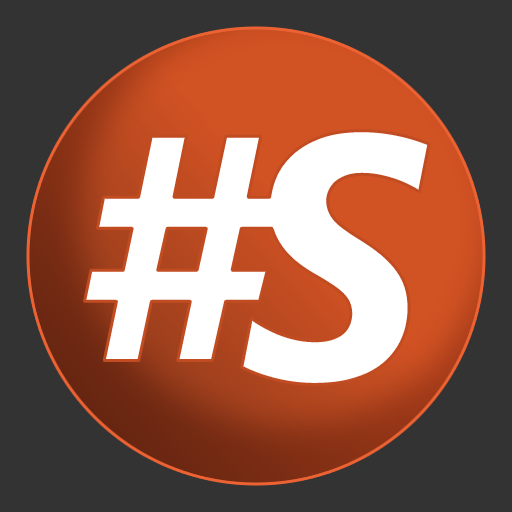
<style>
.page{position:relative;width:512px;height:512px;background:#333333}
.page>*{position:absolute;margin:0}
.t1{font:350px "SegoeUI-BoldItalic";letter-spacing:0.1em;color:#ffffff}
</style>
<div class="page">
<p class="t1" style="left:84px;top:136px;width:196px;height:225px">#</p>
<p class="t1" style="left:241px;top:130px;width:188px;height:255px">S</p>
</div>
